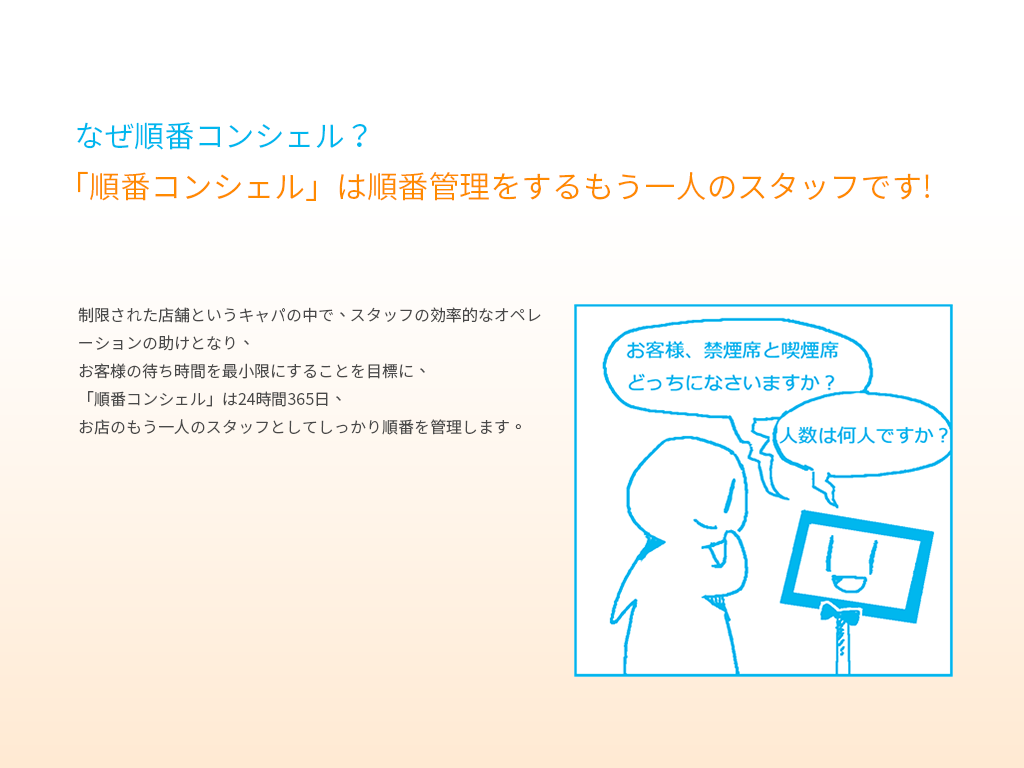
<style>
.page{position:relative;width:1024px;height:768px;background:#ffffff}
.page>*{position:absolute;margin:0}
.t1{font:30px "NotoSansCJKtc-DemiLight";color:#00b7ee}
.t2{font:30.9px "NotoSansCJKtc-DemiLight";color:#ff8a00}
.t3{font:16px "NotoSansCJKtc-DemiLight";color:#494949}
</style>
<div class="page">
<p class="t1" style="left:77px;top:122px;width:290px;height:28px">なぜ順番コンシェル？</p>
<p class="t2" style="left:78px;top:171px;width:851px;height:30px">「順番コンシェル」は順番管理をするもう一人のスタッフです!</p>
<p class="t3" style="left:78px;top:307px;width:463px;height:128px">制限された店舗というキャパの中で、スタッフの効率的なオペレーションの助けとなり、 <br>お客様の待ち時間を最小限にすることを目標に、 <br>「順番コンシェル」は24時間365日、 <br>お店のもう一人のスタッフとしてしっかり順番を管理します。</p>
</div>
